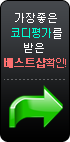
<style>
.page{position:relative;width:70px;height:142px}
.page>*{position:absolute;margin:0}
.t1{font:12px/15px "morris9";color:#ffffff}
.t2{font:12px/15px "morris9";color:#00ffd2}
.t3{font:12px/15px "morris9";letter-spacing:-0.1em;color:#fc7070;font-weight:bold}
.t4{font:12px/15px "morris9";letter-spacing:-0.1em;color:#fc7070}
</style>
<div class="page">
<p class="t1" style="left:4px;top:13px;width:62px;height:55px;text-align:center">가장좋은<br><span class="t2">코디평가</span>를<br>받은 <br><span class="t3">베스트샵</span><span class="t4">확인!</span></p>
</div>
